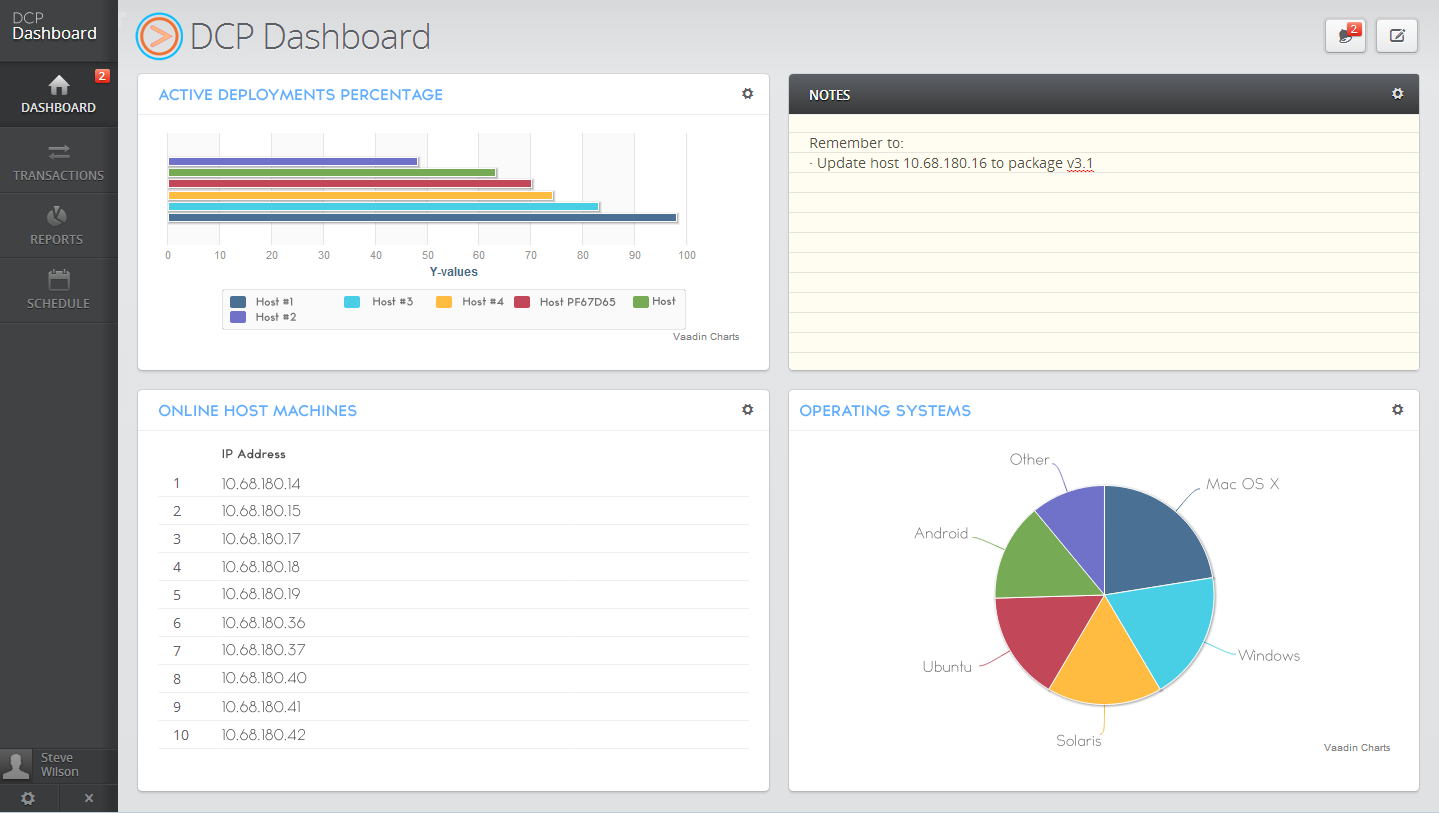
<style>
.page{position:relative;width:1439px;height:813px;background:#ffffff}
.page>*{position:absolute;margin:0}
.t1{font:13.9px "TYPOGRAPHPRO-Light"}
.t2{font:13.9px "TYPOGRAPHPRO-SemiBold";color:#62aefe;text-transform:uppercase}
.t3{font:9.9px "TYPOGRAPHPRO-SemiBold";color:#737373}
.t4{font:11.2px "TYPOGRAPHPRO-SemiBold";color:#4f4f4f}
.t5{font:13.9px "TYPOGRAPHPRO-Light";color:#737373}
.t6{font:13.9px "TYPOGRAPHPRO-Light";color:#4f4f4f}
</style>
<div class="page">
<p class="t1" style="left:13px;top:12px;width:30px;height:12px">DCP</p>
<p class="t2" style="left:158px;top:88px;width:284px;height:13px">Active Deployments percentage</p>
<p class="t3" style="left:256px;top:297px;width:37px;height:9px">Host #1</p>
<p class="t3" style="left:373px;top:297px;width:40px;height:9px">Host #3</p>
<p class="t3" style="left:463px;top:297px;width:41px;height:9px">Host #4</p>
<p class="t3" style="left:540px;top:297px;width:76px;height:9px">Host PF67D65</p>
<p class="t3" style="left:653px;top:296px;width:23px;height:9px">Host</p>
<p class="t3" style="left:256px;top:312px;width:40px;height:9px">Host #2</p>
<p class="t2" style="left:159px;top:404px;width:198px;height:13px">Online Host machines</p>
<p class="t2" style="left:800px;top:404px;width:171px;height:13px">operating systems</p>
<p class="t4" style="left:222px;top:448px;width:64px;height:11px">IP Address</p>
<p class="t5" style="left:1010px;top:453px;width:40px;height:12px">Other</p>
<p class="t6" style="left:222px;top:477px;width:78px;height:13px">10.68.180.14</p>
<p class="t5" style="left:1206px;top:478px;width:73px;height:12px">Mac OS X</p>
<p class="t6" style="left:222px;top:505px;width:79px;height:12px">10.68.180.15</p>
<p class="t6" style="left:222px;top:533px;width:79px;height:12px">10.68.180.17</p>
<p class="t5" style="left:914px;top:527px;width:54px;height:12px">Android</p>
<p class="t6" style="left:222px;top:561px;width:78px;height:12px">10.68.180.18</p>
<p class="t6" style="left:222px;top:588px;width:78px;height:12px">10.68.180.19</p>
<p class="t6" style="left:222px;top:617px;width:83px;height:12px">10.68.180.36</p>
<p class="t6" style="left:222px;top:644px;width:84px;height:12px">10.68.180.37</p>
<p class="t5" style="left:1238px;top:649px;width:62px;height:12px">Windows</p>
<p class="t5" style="left:923px;top:660px;width:48px;height:12px">Ubuntu</p>
<p class="t6" style="left:222px;top:671px;width:85px;height:13px">10.68.180.40</p>
<p class="t6" style="left:222px;top:700px;width:78px;height:13px">10.68.180.41</p>
<p class="t6" style="left:222px;top:728px;width:83px;height:13px">10.68.180.42</p>
<p class="t5" style="left:1057px;top:734px;width:44px;height:12px">Solaris</p>
</div>
